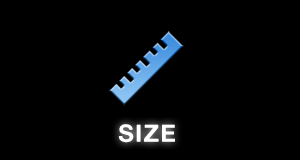
<style>
.page{position:relative;width:300px;height:160px;background:#000000}
.page>*{position:absolute;margin:0}
.t1{font:24px "AlteHaasGrotesk_Bold";letter-spacing:0.05em;color:#ffffff}
</style>
<div class="page">
<p class="t1" style="left:118px;top:124px;width:57px;height:19px">SIZE</p>
</div>
